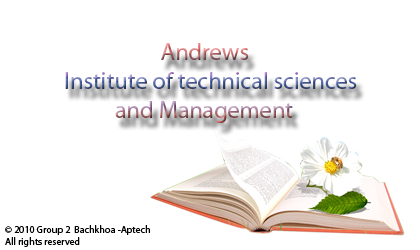
<style>
.page{position:relative;width:420px;height:250px;background:#ffffff}
.page>*{position:absolute;margin:0}
.t1{font:24px "MyriadPro-Regular"}
.t2{font:10px "MyriadPro-Regular";color:#000000}
</style>
<div class="page">
<p class="t1" style="left:65px;top:43px;width:292px;height:80px">Andrews <br>Institute of technical sciences <br>          and Management</p>
<p class="t2" style="left:5px;top:225px;width:145px;height:22px">© 2010 Group 2  Bachkhoa -Aptech<br>All rights reserved</p>
</div>
